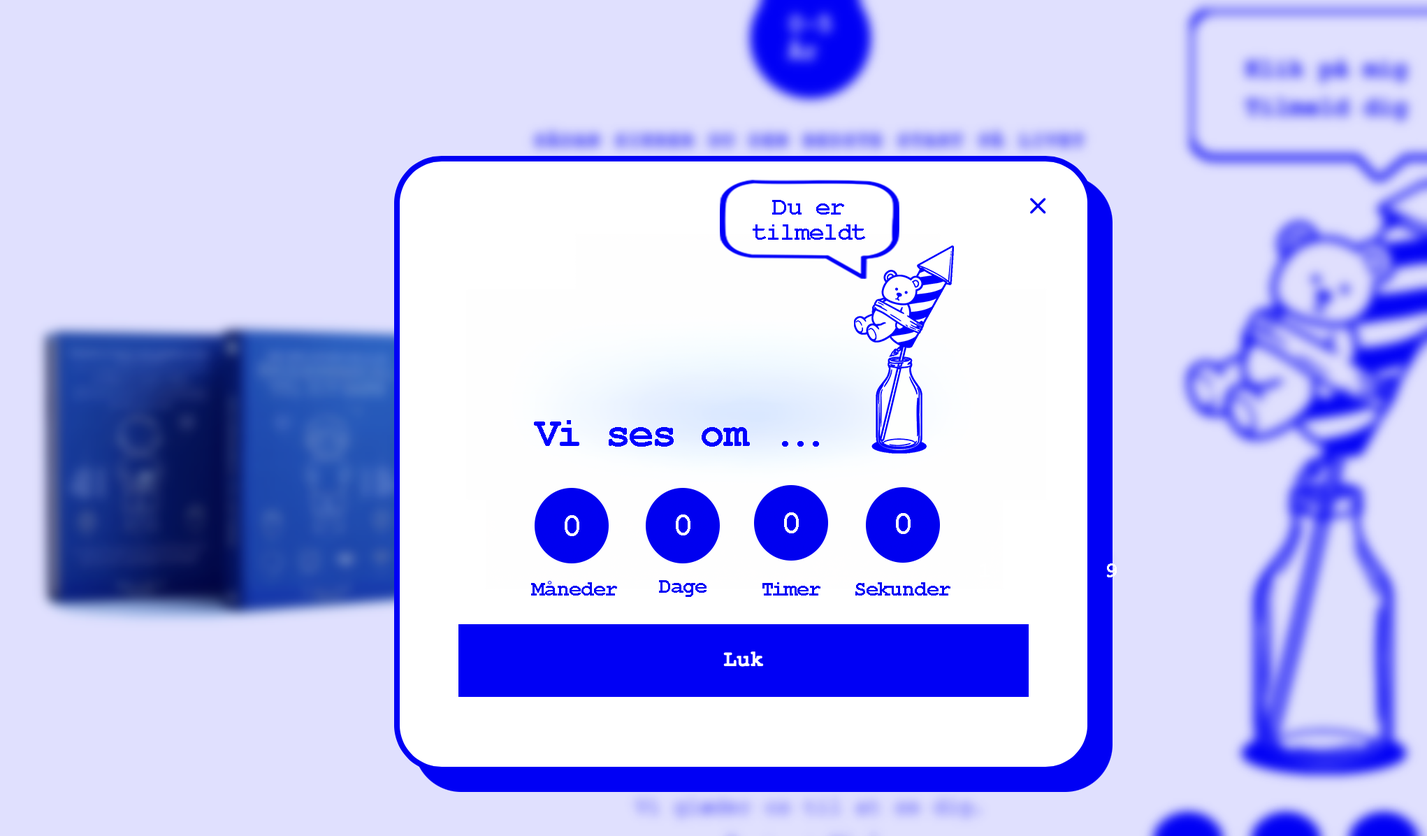
<style>
.page{position:relative;width:1427px;height:836px;background:#e0e0fe}
.page>*{position:absolute;margin:0}
.t1{font:25.2px/25.2px "CourierNewPS-BoldMT";letter-spacing:-0.025em;color:#0000ff}
.t2{font:41.9px "CourierNewPS-BoldMT";letter-spacing:-0.025em;color:#0000ff}
.t3{font:33.5px "CourierNewPS-BoldMT";letter-spacing:-0.025em;color:#ffffff}
.t4{font:22.4px "CourierNewPS-BoldMT";letter-spacing:-0.025em;color:#ffffff}
.t5{font:21px "CourierNewPS-BoldMT";letter-spacing:-0.025em;color:#0000f5}
</style>
<div class="page">
<p class="t1" style="left:753px;top:200px;width:112px;height:40px;text-align:center">Du er<br>tilmeldt</p>
<p class="t2" style="left:534px;top:420px;width:285px;height:27px">Vi ses om ...</p>
<p class="t3" style="left:565px;top:515px;width:14px;height:21px">0</p>
<p class="t3" style="left:676px;top:514px;width:14px;height:21px">0</p>
<p class="t3" style="left:784px;top:512px;width:15px;height:21px">0</p>
<p class="t3" style="left:896px;top:513px;width:14px;height:21px">0</p>
<p class="t4" style="left:1107px;top:563px;width:10px;height:14px">9</p>
<p class="t5" style="left:531px;top:581px;width:86px;height:14px">Måneder</p>
<p class="t5" style="left:659px;top:580px;width:47px;height:17px">Dage</p>
<p class="t5" style="left:762px;top:582px;width:58px;height:13px">Timer</p>
<p class="t5" style="left:855px;top:582px;width:95px;height:13px">Sekunder</p>
</div>
